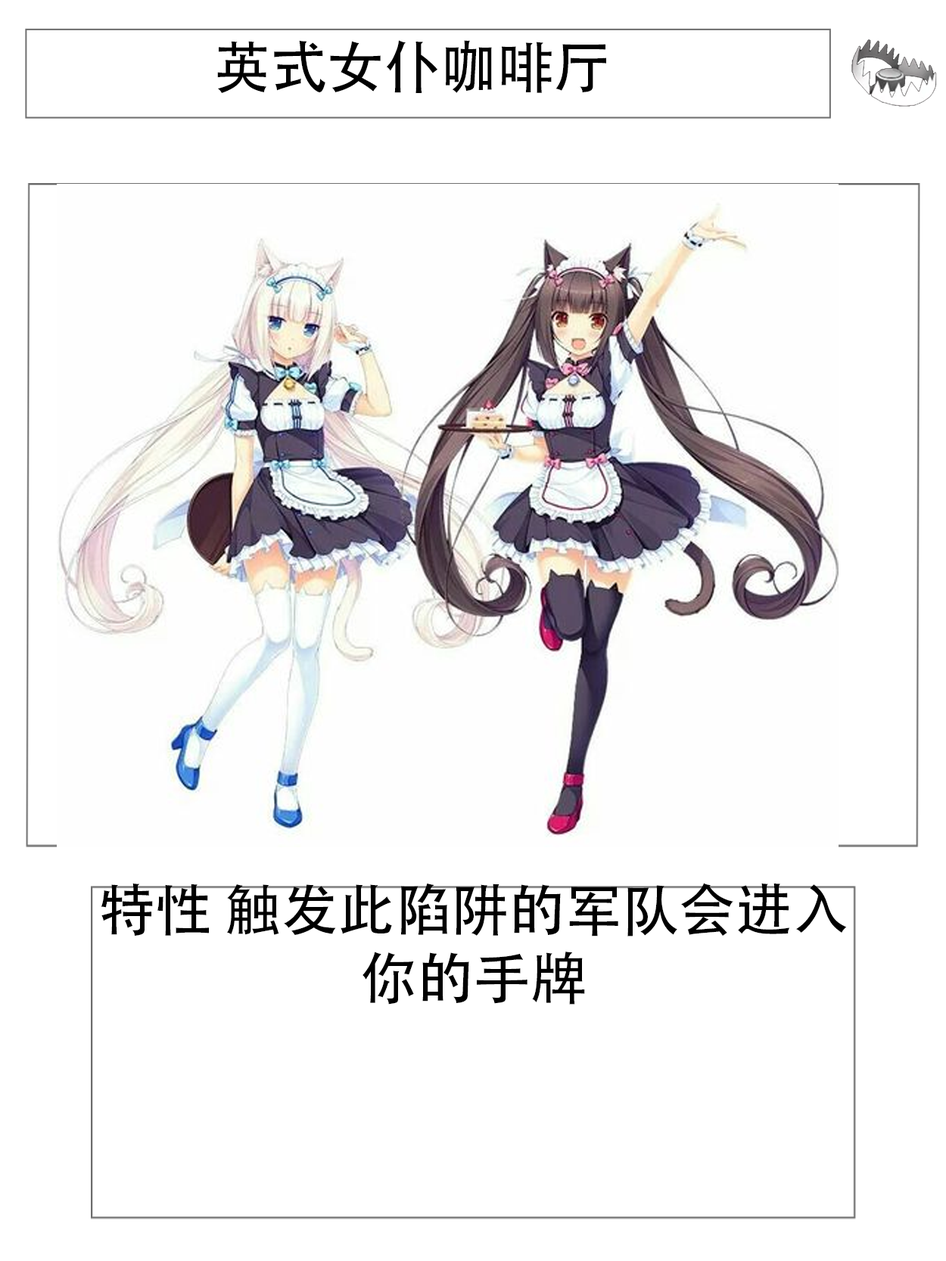
<style>
.page{position:relative;width:946px;height:1261px;background:#ffffff}
.page>*{position:absolute;margin:0}
.t1{font:56.7px "AdobeHeitiStd-Regular";color:#000000}
</style>
<div class="page">
<p class="t1" style="left:217px;top:40px;width:389px;height:53px">英式女仆咖啡厅</p>
<p class="t1" style="left:101px;top:883px;width:745px;height:122px;text-align:center">特性 触发此陷阱的军队会进入你的手牌</p>
</div>
